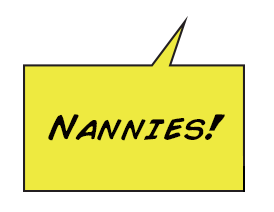
<style>
.page{position:relative;width:274px;height:212px;background:#ffffff}
.page>*{position:absolute;margin:0}
.t1{font:36px "ComicBook";letter-spacing:0.02em;color:#050100}
</style>
<div class="page">
<p class="t1" style="left:48px;top:114px;width:177px;height:27px">Nannies!</p>
</div>
